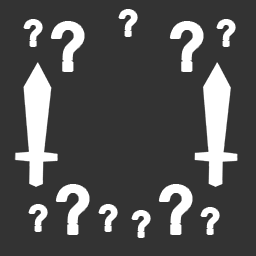
<style>
.page{position:relative;width:256px;height:256px;background:#333333}
.page>*{position:absolute;margin:0}
.t1{font:35px "Mangal-Bold";color:#ffffff}
.t2{font:65px "Mangal-Bold";color:#ffffff}
</style>
<div class="page">
<p class="t1" style="left:119px;top:10px;width:18px;height:26px">?</p>
<p class="t1" style="left:24px;top:20px;width:18px;height:26px">?</p>
<p class="t2" style="left:51px;top:22px;width:33px;height:49px">?</p>
<p class="t2" style="left:170px;top:22px;width:33px;height:49px">?</p>
<p class="t1" style="left:217px;top:20px;width:18px;height:26px">?</p>
<p class="t2" style="left:56px;top:185px;width:33px;height:49px">?</p>
<p class="t2" style="left:159px;top:185px;width:33px;height:49px">?</p>
<p class="t1" style="left:29px;top:205px;width:18px;height:26px">?</p>
<p class="t1" style="left:99px;top:205px;width:18px;height:26px">?</p>
<p class="t1" style="left:201px;top:208px;width:18px;height:26px">?</p>
<p class="t1" style="left:132px;top:211px;width:18px;height:26px">?</p>
</div>
